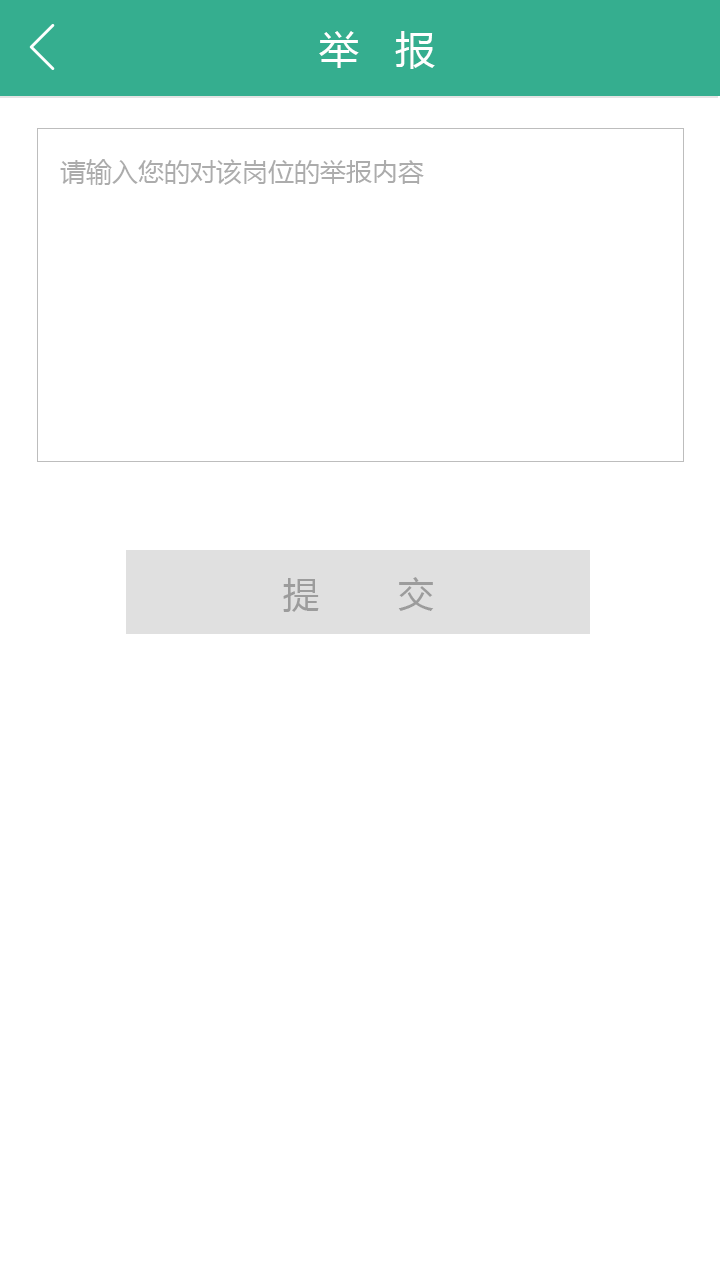
<style>
.page{position:relative;width:720px;height:1280px;background:#ffffff}
.page>*{position:absolute;margin:0}
.t1{font:40px "MicrosoftYaHei";letter-spacing:0.1em;color:#ffffff}
.t2{font:26px "MicrosoftYaHei";color:#acacac}
.t3{font:36px "MicrosoftYaHei";letter-spacing:0.2em;color:#9b9b9b}
</style>
<div class="page">
<p class="t1" style="left:319px;top:31px;width:116px;height:38px">举  报</p>
<p class="t2" style="left:60px;top:159px;width:364px;height:26px">请输入您的对该岗位的举报内容</p>
<p class="t3" style="left:283px;top:577px;width:151px;height:35px">提    交</p>
</div>
